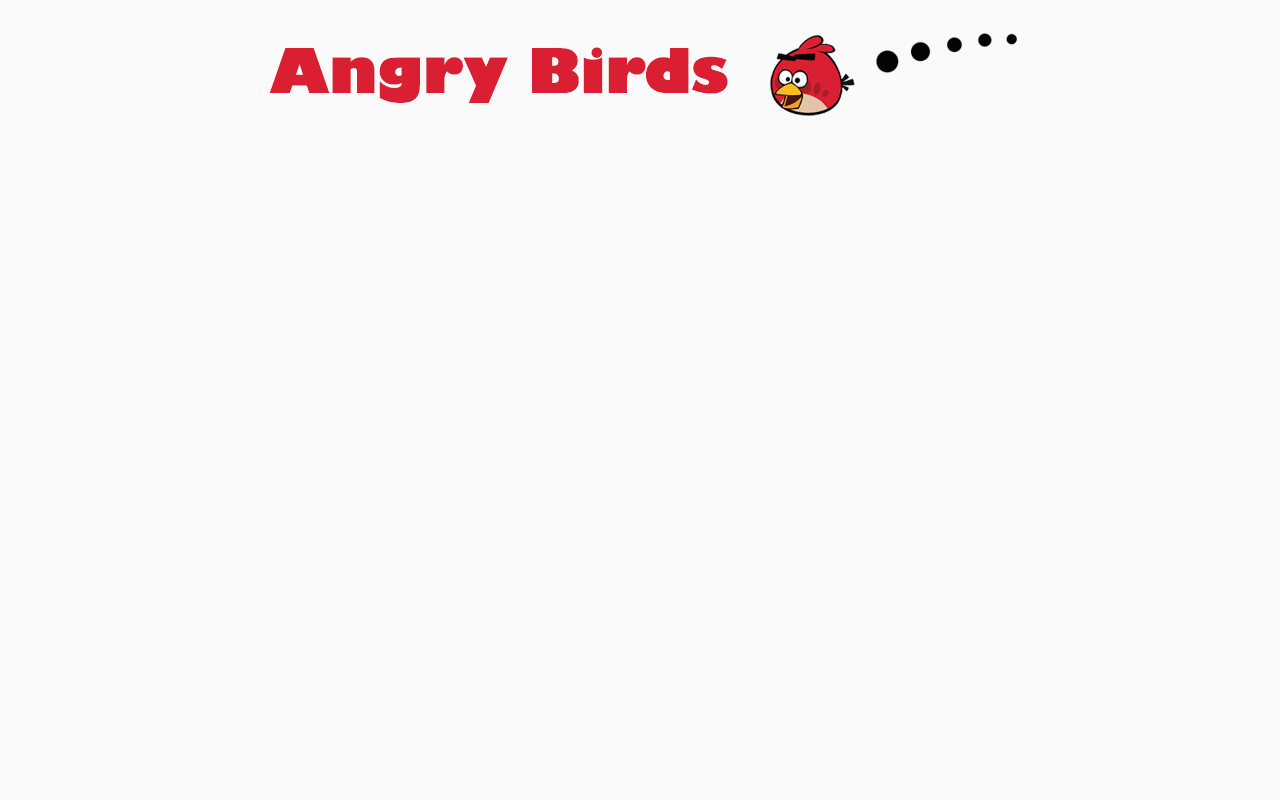
<style>
.page{position:relative;width:1280px;height:800px;background:#fbfafb}
.page>*{position:absolute;margin:0}
.t1{font:60px "GillSans-UltraBold";color:#da1f32}
</style>
<div class="page">
<p class="t1" style="left:269px;top:47px;width:459px;height:56px">Angry Birds</p>
</div>
